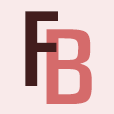
<style>
.page{position:relative;width:114px;height:114px;background:#f9eaea}
.page>*{position:absolute;margin:0}
.t1{font:88px "H2hdrM";color:#421d1d}
.t2{font:88px "H2hdrM";color:#d56b6b}
</style>
<div class="page">
<p class="t1" style="left:25px;top:11px;width:33px;height:75px">F</p>
<p class="t2" style="left:46px;top:29px;width:46px;height:75px">B</p>
</div>
